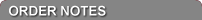
<style>
.page{position:relative;width:202px;height:20px;background:#858585}
.page>*{position:absolute;margin:0}
.t1{font:13.3px "Arial-BoldMT";color:#ffffff}
</style>
<div class="page">
<p class="t1" style="left:9px;top:5px;width:97px;height:11px">ORDER NOTES</p>
</div>
